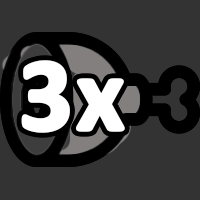
<style>
.page{position:relative;width:200px;height:200px;background:#333333}
.page>*{position:absolute;margin:0}
.t1{font:106.4px "Calibri-Bold";color:#ffffff;font-weight:bold}
</style>
<div class="page">
<p class="t1" style="left:21px;top:60px;width:104px;height:73px">3x</p>
</div>
